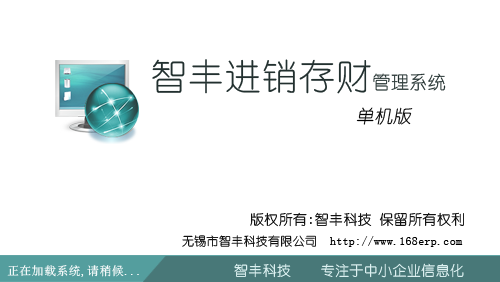
<style>
.page{position:relative;width:500px;height:282px;background:#ffffff}
.page>*{position:absolute;margin:0}
.t1{font:36px "YouYuan";letter-spacing:0.025em;color:#22302f}
.t2{font:18px "YouYuan";letter-spacing:0.025em;color:#22302f}
.t3{font:18px "YouYuan";letter-spacing:0.025em;color:#000000;font-style:italic}
.t4{font:14px "YouYuan";letter-spacing:0.025em;color:#000000}
.t5{font:12px "YouYuan";letter-spacing:0.025em;color:#000000}
.t6{font:12px "SimSun";letter-spacing:0.025em;color:#ffffff}
.t7{font:14px "YouYuan";letter-spacing:0.025em;color:#e8fafa}
</style>
<div class="page">
<p class="t1" style="left:152px;top:59px;width:294px;height:35px">智丰进销存财<span class="t2">管理系统</span></p>
<p class="t3" style="left:356px;top:107px;width:57px;height:18px">单机版</p>
<p class="t4" style="left:250px;top:212px;width:214px;height:15px">版权所有:智丰科技 保留所有权利</p>
<p class="t5" style="left:182px;top:235px;width:281px;height:12px">无锡市智丰科技有限公司  http://www.168erp.com</p>
<p class="t6" style="left:7px;top:265px;width:132px;height:12px">正在加载系统,请稍候...</p>
<p class="t7" style="left:234px;top:263px;width:230px;height:15px">智丰科技    专注于中小企业信息化</p>
</div>
